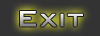
<style>
.page{position:relative;width:100px;height:36px;background:#333333}
.page>*{position:absolute;margin:0}
.t1{font:30px "BankGothicBT-Medium"}
</style>
<div class="page">
<p class="t1" style="left:20px;top:11px;width:63px;height:16px">Exit</p>
</div>
